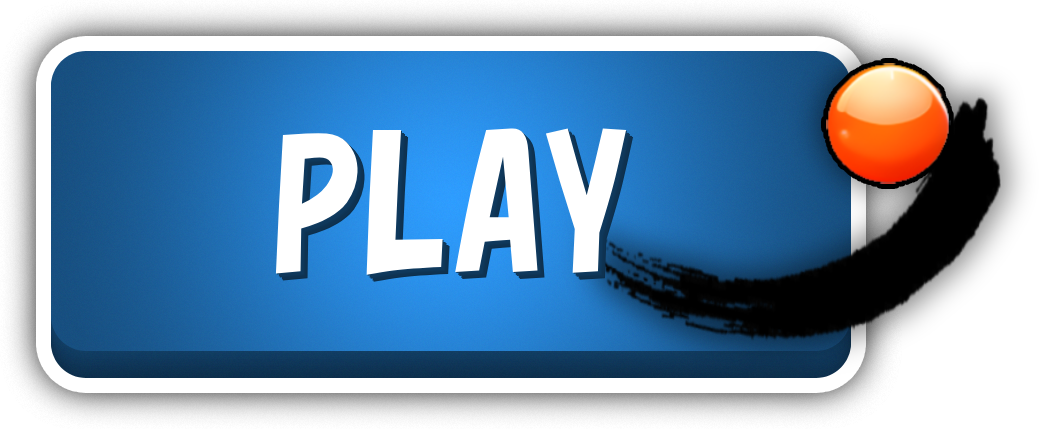
<style>
.page{position:relative;width:1039px;height:429px;background:#ffffff}
.page>*{position:absolute;margin:0}
.t1{font:180px "HGPSoeiKakupoptai";color:#ffffff}
</style>
<div class="page">
<p class="t1" style="left:275px;top:127px;width:352px;height:148px">PLAY</p>
</div>
